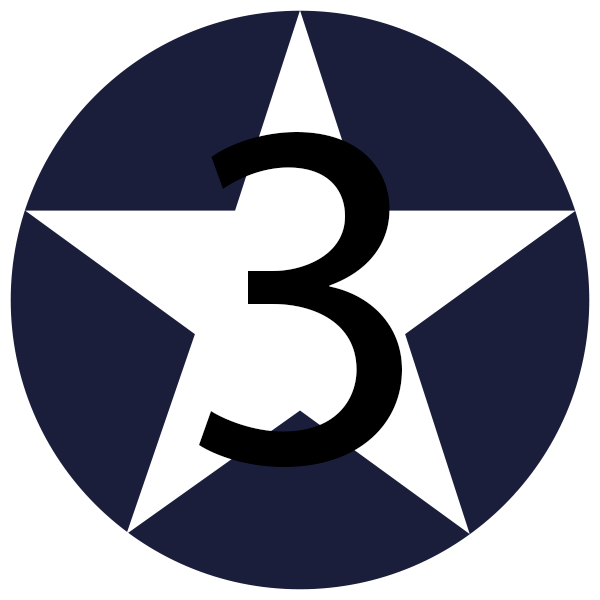
<style>
.page{position:relative;width:600px;height:600px;background:#ffffff}
.page>*{position:absolute;margin:0}
.t1{font:500px "MyriadPro-Regular";color:#000000}
</style>
<div class="page">
<p class="t1" style="left:199px;top:132px;width:203px;height:335px">3</p>
</div>
